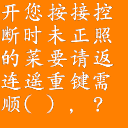
<style>
.page{position:relative;width:128px;height:128px;background:#ff8000}
.page>*{position:absolute;margin:0}
.t1{font:21px/23px "DFPKaiW5";letter-spacing:0.095em;color:#ffffff}
.t2{font:21px/23px "DFPKaiW5";letter-spacing:0.135em;color:#ffffff}
.t3{font:21px/23px "DFPKaiW5";letter-spacing:0.035em;color:#ffffff}
.t4{font:21px/23px "DFPKaiW5";letter-spacing:0.115em;color:#ffffff}
.t5{font:21px/23px "DFPKaiW5";letter-spacing:0.155em;color:#ffffff}
.t6{font:21px/23px "DFPKaiW5";letter-spacing:0.055em;color:#ffffff}
.t7{font:21px/23px "DFPKaiW5";letter-spacing:-0.005em;color:#ffffff}
.t8{font:21px/23px "DFPKaiW5";letter-spacing:-0.465em;color:#ffffff}
.t9{font:21px/23px "DFPKaiW5";letter-spacing:0.075em;color:#ffffff}
.t10{font:21px/23px "DFPKaiW5";letter-spacing:0.015em;color:#ffffff}
.t11{font:21px/23px "DFPKaiW5";letter-spacing:0.315em;color:#ffffff}
</style>
<div class="page">
<p class="t1" style="left:1px;top:2px;width:112px;height:112px">开<span class="t2">您</span>按接控<br><span class="t3">断</span><span class="t4">时</span><span class="t5">未</span>正照<br>的<span class="t4">菜</span>要<span class="t4">请</span>返<br><span class="t4">连</span><span class="t6">遥</span><span class="t5">重</span><span class="t7">键</span>需<br> <span class="t8">顺</span><span class="t9">（ </span><span class="t10">）</span><span class="t11">，</span>?</p>
</div>
